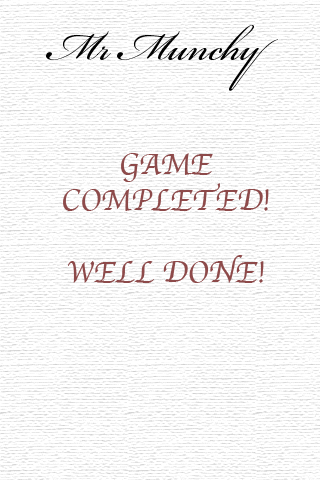
<style>
.page{position:relative;width:320px;height:480px;background:#ffffff}
.page>*{position:absolute;margin:0}
.t1{font:60px "BickhamScriptPro-Regular";color:#000000}
.t2{font:30px "Apple-Chancery";color:#8d4a4a}
</style>
<div class="page">
<p class="t1" style="left:46px;top:25px;width:232px;height:66px">Mr Munchy</p>
<p class="t2" style="left:63px;top:153px;width:206px;height:130px;text-align:center">GAME<br>COMPLETED!<br><br>WELL DONE!</p>
</div>
